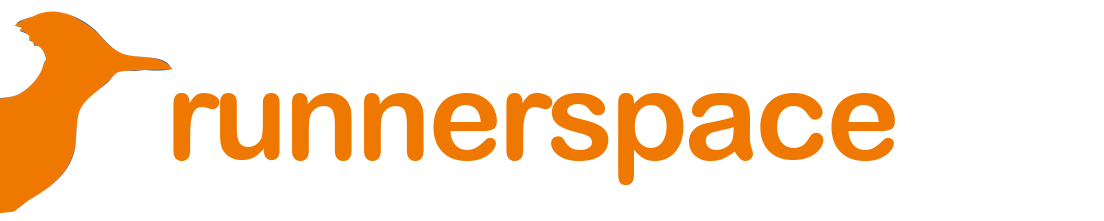
<style>
.page{position:relative;width:1104px;height:221px;background:#ffffff}
.page>*{position:absolute;margin:0}
.t1{font:125px "ArialRoundedMTBold";letter-spacing:-0.03em;color:#ef7900}
</style>
<div class="page">
<p class="t1" style="left:173px;top:92px;width:722px;height:93px">runnerspace</p>
</div>
